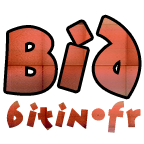
<style>
.page{position:relative;width:144px;height:144px;background:#ffffff}
.page>*{position:absolute;margin:0}
.t1{font:80px "Jonas-Bold";letter-spacing:0.08em;font-weight:bold}
.t2{font:80px "Jonas-Bold";letter-spacing:0.02em;font-weight:bold}
.t3{font:29px "Jonas-Bold";letter-spacing:0.08em;font-weight:bold}
</style>
<div class="page">
<p class="t1" style="left:6px;top:17px;width:133px;height:80px"><span class="t2">B</span>id</p>
<p class="t3" style="left:6px;top:100px;width:135px;height:33px">bitin•fr</p>
</div>
